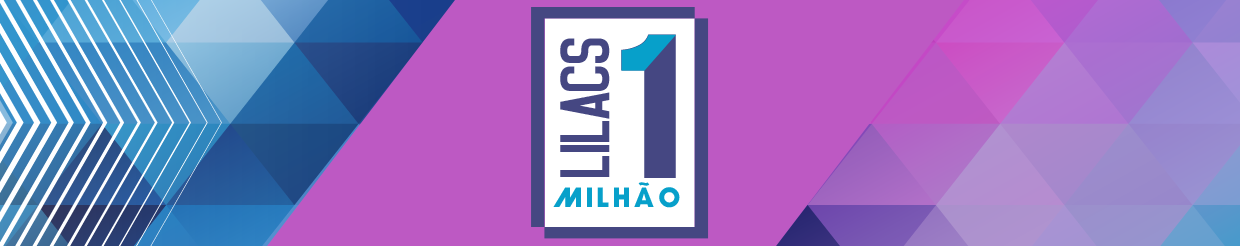
<style>
.page{position:relative;width:1240px;height:246px;background:#bd59c3}
.page>*{position:absolute;margin:0}
.t1{font:71.9px "Noasarck";color:#454782}
.t2{font:182.5px "HelveticaInserat";letter-spacing:0.1em;color:#454782}
.t3{font:26.2px "RedeGlobo-Bold";letter-spacing:0.16em;color:#07a0ca}
</style>
<div class="page">
<p class="t1" style="left:560px;top:38px;width:50px;height:139px;rotate:-90deg">LILACS</p>
<p class="t2" style="left:621px;top:34px;width:55px;height:144px">1</p>
<p class="t3" style="left:553px;top:182px;width:127px;height:26px">milhÃo</p>
</div>
